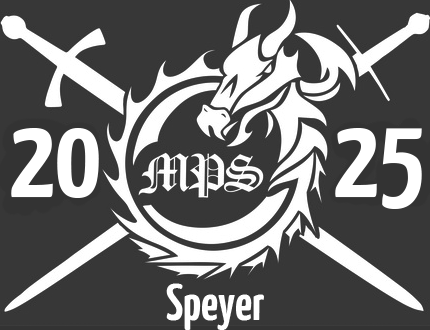
<style>
.page{position:relative;width:430px;height:330px;background:#373737}
.page>*{position:absolute;margin:0}
.t1{font:115px "YanoneKaffeesatz-Bold";color:#ffffff}
.t2{font:50px "YanoneKaffeesatz-Bold";color:#ffffff}
</style>
<div class="page">
<p class="t1" style="left:11px;top:128px;width:88px;height:70px">20</p>
<p class="t1" style="left:335px;top:128px;width:87px;height:81px">25</p>
<p class="t2" style="left:166px;top:283px;width:98px;height:47px">Speyer</p>
</div>
